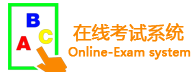
<style>
.page{position:relative;width:194px;height:72px;background:#ffffff}
.page>*{position:absolute;margin:0}
.t1{font:18px "MicrosoftYaHei";color:#fa8801;font-weight:bold}
.t2{font:12px "MicrosoftYaHei";color:#fa8801;font-weight:bold}
</style>
<div class="page">
<p class="t1" style="left:73px;top:23px;width:111px;height:19px">在线考试系统</p>
<p class="t2" style="left:68px;top:46px;width:123px;height:14px">Online-Exam system</p>
</div>
